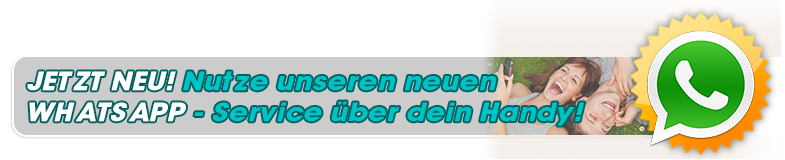
<style>
.page{position:relative;width:785px;height:160px;background:#ffffff}
.page>*{position:absolute;margin:0}
.t1{font:25.8px "AvantGuardSWBoldItalicSWFTE";color:#00c3c5;scale:1.14 1}
.t2{font:25.8px "AvantGuardSWBoldItalicSWFTE";color:#ffffff;scale:1.14 1}
</style>
<div class="page">
<p class="t1" style="left:27px;top:71px;width:558px;height:55px"><span class="t2">JETZT NEU! </span>Nutze unseren neuen <br><span class="t2">WHATSAPP </span>- Service über dein Handy!</p>
</div>
